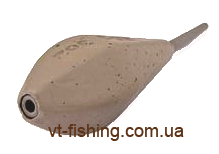
<style>
.page{position:relative;width:219px;height:154px;background:#ffffff}
.page>*{position:absolute;margin:0}
.t1{font:18px "ArialMT";color:#5c3317}
</style>
<div class="page">
<p class="t1" style="left:48px;top:124px;width:136px;height:17px">vt-fishing.com.ua</p>
</div>
